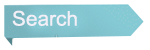
<style>
.page{position:relative;width:150px;height:50px;background:#ffffff}
.page>*{position:absolute;margin:0}
.t1{font:20.3px "DokChampa";color:#f3eff7}
</style>
<div class="page">
<p class="t1" style="left:12px;top:10px;width:65px;height:16px">Search</p>
</div>
